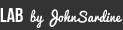
<style>
.page{position:relative;width:123px;height:30px;background:#333333}
.page>*{position:absolute;margin:0}
.t1{font:20px "BebasNeue";color:#ffffff}
.t2{font:13px "Pacifico";color:#ffffff}
</style>
<div class="page">
<p class="t1" style="left:0px;top:8px;width:23px;height:14px">Lab</p>
<p class="t2" style="left:30px;top:9px;width:93px;height:19px">by JohnSardine</p>
</div>
